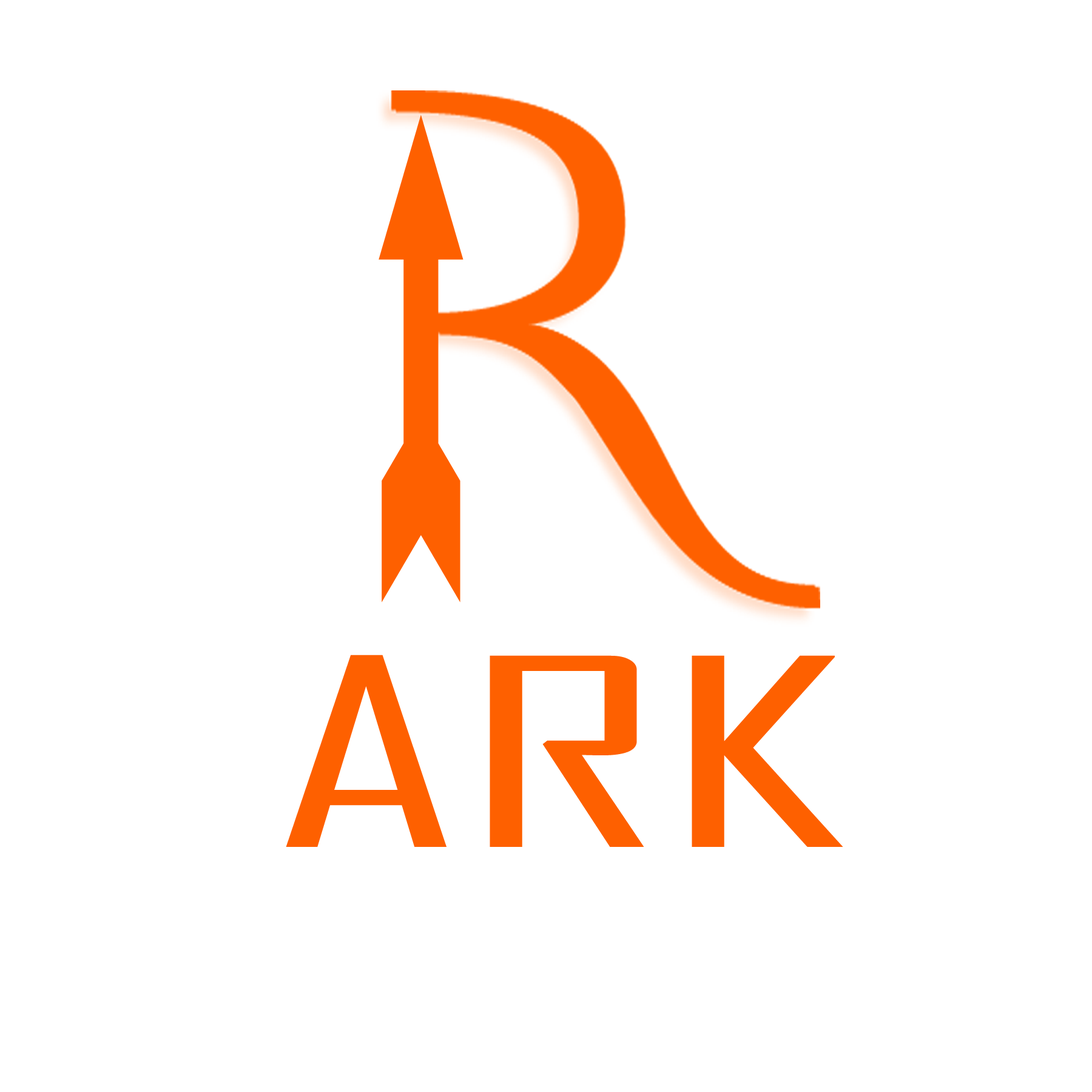
<style>
.page{position:relative;width:1092px;height:1092px;background:#ffffff}
.page>*{position:absolute;margin:0}
.t1{font:249.9px "AgencyFB-Reg";color:#fe6000;scale:1.89 1}
</style>
<div class="page">
<p class="t1" style="left:286px;top:655px;width:557px;height:192px">ARK</p>
</div>
